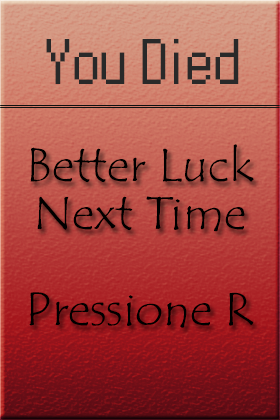
<style>
.page{position:relative;width:280px;height:420px}
.page>*{position:absolute;margin:0}
.t1{font:72px "Pokemon R/S";color:#292929}
.t2{font:47.9px/48px "TempusSansITC";color:#000000}
</style>
<div class="page">
<p class="t1" style="left:46px;top:39px;width:193px;height:45px">You Died</p>
<p class="t2" style="left:29px;top:144px;width:225px;height:184px;text-align:center">Better Luck<br>Next Time<br><br>Pressione R</p>
</div>
